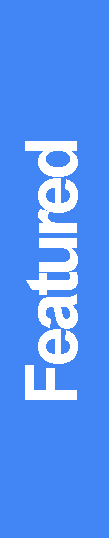
<style>
.page{position:relative;width:109px;height:538px;background:#4285f4}
.page>*{position:absolute;margin:0}
.t1{font:72px "Arial-BoldMT";letter-spacing:-0.07em;color:#ffffff}
</style>
<div class="page">
<p class="t1" style="left:25px;top:141px;width:53px;height:259px;rotate:-90deg">Featured</p>
</div>
